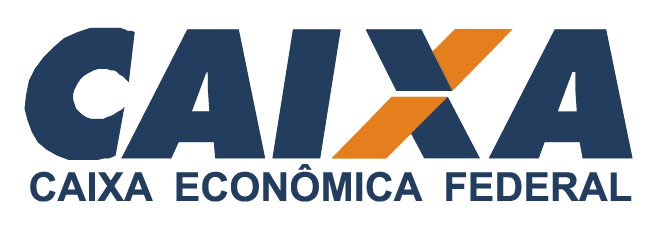
<style>
.page{position:relative;width:660px;height:240px;background:#ffffff}
.page>*{position:absolute;margin:0}
.t1{font:40px "Arial-BoldMT";color:#233d5f}
</style>
<div class="page">
<p class="t1" style="left:30px;top:164px;width:602px;height:38px">CAIXA  ECONÔMICA  FEDERAL</p>
</div>
